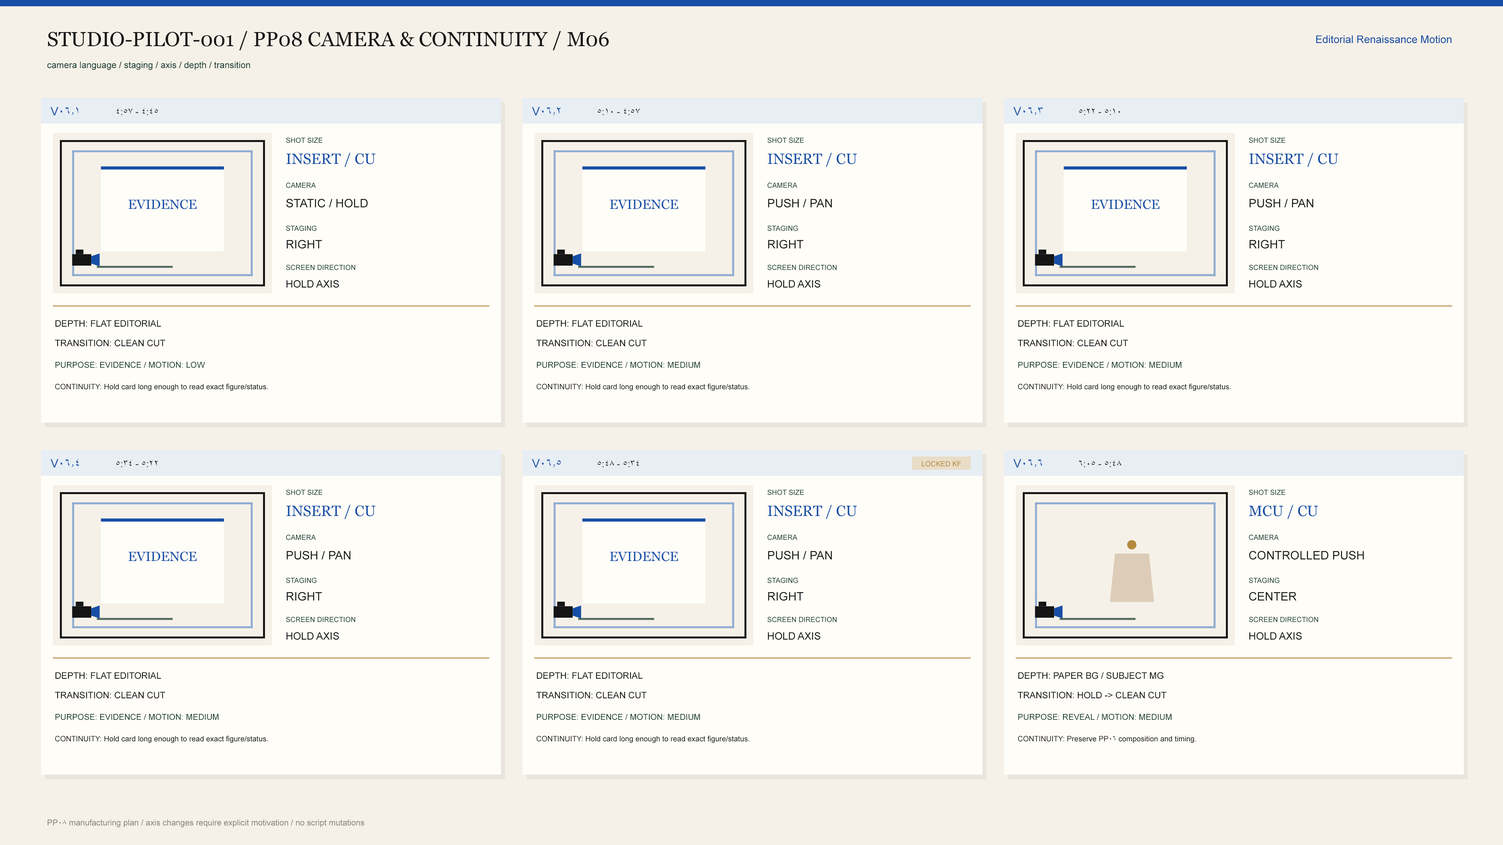
<style>
.page{position:relative;width:1503px;height:845px;background:#fffdf8}
.page>*{position:absolute;margin:0}
.t1{font:20.3px "Georgia";color:#151515}
.t2{font:10.6px "ArialMT";color:#174fa6}
.t3{font:9px "ArialMT";color:#173c32}
.t4{font:11.7px "ArialMT";color:#174fa6}
.t5{font:9.4px "ArialMT";color:#151515}
.t6{font:7px "ArialMT";color:#173c32}
.t7{font:14.9px "Georgia";color:#174fa6}
.t8{font:13.3px "Georgia";color:#174fa6}
.t9{font:11.7px "ArialMT";color:#151515}
.t10{font:10.2px "ArialMT";color:#151515}
.t11{font:9px "ArialMT";color:#151515}
.t12{font:8.2px "ArialMT";color:#173c32}
.t13{font:7.4px "ArialMT";color:#151515}
.t14{font:7px "ArialMT";color:#b58a3e}
.t15{font:21.5px "ArialMT";color:#b58a3e}
.t16{font:8.2px "ArialMT";color:#817f7a}
</style>
<div class="page">
<p class="t1" style="left:48px;top:31px;width:561px;height:19px">STUDIO-PILOT-001 / PP08 CAMERA &amp; CONTINUITY / M06</p>
<p class="t2" style="left:1316px;top:35px;width:135px;height:8px">Editorial Renaissance Motion</p>
<p class="t3" style="left:47px;top:61px;width:203px;height:9px">camera language / staging / axis / depth / transition</p>
<p class="t4" style="left:50px;top:107px;width:28px;height:8px">V06.1</p>
<p class="t5" style="left:117px;top:108px;width:41px;height:7px">4:45 - 4:57</p>
<p class="t4" style="left:532px;top:107px;width:28px;height:8px">V06.2</p>
<p class="t5" style="left:598px;top:108px;width:41px;height:7px">4:57 - 5:10</p>
<p class="t4" style="left:1013px;top:107px;width:29px;height:8px">V06.3</p>
<p class="t5" style="left:1079px;top:108px;width:41px;height:7px">5:10 - 5:22</p>
<p class="t6" style="left:286px;top:137px;width:36px;height:6px">SHOT SIZE</p>
<p class="t6" style="left:767px;top:137px;width:37px;height:6px">SHOT SIZE</p>
<p class="t6" style="left:1249px;top:137px;width:36px;height:6px">SHOT SIZE</p>
<p class="t7" style="left:286px;top:153px;width:90px;height:14px">INSERT / CU</p>
<p class="t7" style="left:767px;top:153px;width:90px;height:14px">INSERT / CU</p>
<p class="t7" style="left:1249px;top:153px;width:89px;height:14px">INSERT / CU</p>
<p class="t6" style="left:286px;top:182px;width:30px;height:6px">CAMERA</p>
<p class="t6" style="left:767px;top:182px;width:30px;height:6px">CAMERA</p>
<p class="t6" style="left:1249px;top:182px;width:29px;height:6px">CAMERA</p>
<p class="t8" style="left:128px;top:200px;width:69px;height:9px">EVIDENCE</p>
<p class="t9" style="left:286px;top:199px;width:82px;height:9px">STATIC / HOLD</p>
<p class="t8" style="left:610px;top:200px;width:68px;height:9px">EVIDENCE</p>
<p class="t9" style="left:768px;top:199px;width:64px;height:9px">PUSH / PAN</p>
<p class="t8" style="left:1091px;top:200px;width:68px;height:9px">EVIDENCE</p>
<p class="t9" style="left:1249px;top:199px;width:64px;height:9px">PUSH / PAN</p>
<p class="t6" style="left:286px;top:225px;width:31px;height:6px">STAGING</p>
<p class="t6" style="left:767px;top:225px;width:31px;height:6px">STAGING</p>
<p class="t6" style="left:1249px;top:225px;width:30px;height:6px">STAGING</p>
<p class="t9" style="left:286px;top:240px;width:36px;height:9px">RIGHT</p>
<p class="t9" style="left:768px;top:240px;width:35px;height:9px">RIGHT</p>
<p class="t9" style="left:1249px;top:240px;width:36px;height:9px">RIGHT</p>
<p class="t6" style="left:286px;top:265px;width:69px;height:5px">SCREEN DIRECTION</p>
<p class="t6" style="left:767px;top:265px;width:70px;height:5px">SCREEN DIRECTION</p>
<p class="t6" style="left:1249px;top:265px;width:69px;height:5px">SCREEN DIRECTION</p>
<p class="t10" style="left:286px;top:280px;width:53px;height:8px">HOLD AXIS</p>
<p class="t10" style="left:768px;top:280px;width:52px;height:8px">HOLD AXIS</p>
<p class="t10" style="left:1249px;top:280px;width:52px;height:8px">HOLD AXIS</p>
<p class="t11" style="left:55px;top:320px;width:106px;height:7px">DEPTH: FLAT EDITORIAL</p>
<p class="t11" style="left:536px;top:320px;width:107px;height:7px">DEPTH: FLAT EDITORIAL</p>
<p class="t11" style="left:1018px;top:320px;width:106px;height:7px">DEPTH: FLAT EDITORIAL</p>
<p class="t11" style="left:55px;top:340px;width:110px;height:7px">TRANSITION: CLEAN CUT</p>
<p class="t11" style="left:536px;top:340px;width:110px;height:7px">TRANSITION: CLEAN CUT</p>
<p class="t11" style="left:1017px;top:340px;width:111px;height:7px">TRANSITION: CLEAN CUT</p>
<p class="t12" style="left:55px;top:362px;width:150px;height:6px">PURPOSE: EVIDENCE / MOTION: LOW</p>
<p class="t12" style="left:536px;top:362px;width:164px;height:6px">PURPOSE: EVIDENCE / MOTION: MEDIUM</p>
<p class="t12" style="left:1018px;top:362px;width:163px;height:6px">PURPOSE: EVIDENCE / MOTION: MEDIUM</p>
<p class="t13" style="left:55px;top:384px;width:213px;height:7px">CONTINUITY: Hold card long enough to read exact figure/status.</p>
<p class="t13" style="left:536px;top:384px;width:213px;height:7px">CONTINUITY: Hold card long enough to read exact figure/status.</p>
<p class="t13" style="left:1018px;top:384px;width:213px;height:7px">CONTINUITY: Hold card long enough to read exact figure/status.</p>
<p class="t4" style="left:50px;top:459px;width:29px;height:9px">V06.4</p>
<p class="t5" style="left:116px;top:460px;width:42px;height:7px">5:22 - 5:34</p>
<p class="t4" style="left:532px;top:459px;width:29px;height:9px">V06.5</p>
<p class="t5" style="left:598px;top:460px;width:41px;height:7px">5:34 - 5:48</p>
<p class="t14" style="left:922px;top:461px;width:39px;height:6px">LOCKED KF</p>
<p class="t4" style="left:1013px;top:459px;width:29px;height:9px">V06.6</p>
<p class="t5" style="left:1079px;top:460px;width:42px;height:7px">5:48 - 6:05</p>
<p class="t6" style="left:286px;top:490px;width:36px;height:5px">SHOT SIZE</p>
<p class="t6" style="left:767px;top:490px;width:37px;height:5px">SHOT SIZE</p>
<p class="t6" style="left:1249px;top:490px;width:36px;height:5px">SHOT SIZE</p>
<p class="t7" style="left:286px;top:505px;width:90px;height:14px">INSERT / CU</p>
<p class="t7" style="left:767px;top:505px;width:90px;height:14px">INSERT / CU</p>
<p class="t7" style="left:1249px;top:505px;width:69px;height:14px">MCU / CU</p>
<p class="t6" style="left:286px;top:535px;width:30px;height:5px">CAMERA</p>
<p class="t6" style="left:767px;top:535px;width:30px;height:5px">CAMERA</p>
<p class="t15" style="left:1127px;top:540px;width:9px;height:10px">●</p>
<p class="t6" style="left:1249px;top:535px;width:29px;height:5px">CAMERA</p>
<p class="t8" style="left:128px;top:552px;width:69px;height:10px">EVIDENCE</p>
<p class="t9" style="left:286px;top:551px;width:65px;height:9px">PUSH / PAN</p>
<p class="t8" style="left:610px;top:552px;width:68px;height:10px">EVIDENCE</p>
<p class="t9" style="left:768px;top:551px;width:64px;height:9px">PUSH / PAN</p>
<p class="t9" style="left:1249px;top:551px;width:115px;height:9px">CONTROLLED PUSH</p>
<p class="t6" style="left:286px;top:578px;width:31px;height:5px">STAGING</p>
<p class="t6" style="left:767px;top:578px;width:31px;height:5px">STAGING</p>
<p class="t6" style="left:1249px;top:578px;width:30px;height:5px">STAGING</p>
<p class="t9" style="left:286px;top:592px;width:36px;height:9px">RIGHT</p>
<p class="t9" style="left:768px;top:592px;width:35px;height:9px">RIGHT</p>
<p class="t9" style="left:1249px;top:592px;width:47px;height:9px">CENTER</p>
<p class="t6" style="left:286px;top:617px;width:69px;height:6px">SCREEN DIRECTION</p>
<p class="t6" style="left:767px;top:617px;width:70px;height:6px">SCREEN DIRECTION</p>
<p class="t6" style="left:1249px;top:617px;width:69px;height:6px">SCREEN DIRECTION</p>
<p class="t10" style="left:286px;top:632px;width:53px;height:8px">HOLD AXIS</p>
<p class="t10" style="left:768px;top:632px;width:52px;height:8px">HOLD AXIS</p>
<p class="t10" style="left:1249px;top:632px;width:52px;height:8px">HOLD AXIS</p>
<p class="t11" style="left:55px;top:672px;width:106px;height:7px">DEPTH: FLAT EDITORIAL</p>
<p class="t11" style="left:536px;top:672px;width:107px;height:7px">DEPTH: FLAT EDITORIAL</p>
<p class="t11" style="left:1018px;top:672px;width:145px;height:7px">DEPTH: PAPER BG / SUBJECT MG</p>
<p class="t11" style="left:55px;top:692px;width:110px;height:7px">TRANSITION: CLEAN CUT</p>
<p class="t11" style="left:536px;top:692px;width:110px;height:7px">TRANSITION: CLEAN CUT</p>
<p class="t11" style="left:1017px;top:692px;width:149px;height:7px">TRANSITION: HOLD -&gt; CLEAN CUT</p>
<p class="t12" style="left:55px;top:714px;width:164px;height:6px">PURPOSE: EVIDENCE / MOTION: MEDIUM</p>
<p class="t12" style="left:536px;top:714px;width:164px;height:6px">PURPOSE: EVIDENCE / MOTION: MEDIUM</p>
<p class="t12" style="left:1018px;top:714px;width:153px;height:6px">PURPOSE: REVEAL / MOTION: MEDIUM</p>
<p class="t13" style="left:55px;top:736px;width:213px;height:7px">CONTINUITY: Hold card long enough to read exact figure/status.</p>
<p class="t13" style="left:536px;top:736px;width:213px;height:7px">CONTINUITY: Hold card long enough to read exact figure/status.</p>
<p class="t13" style="left:1018px;top:736px;width:178px;height:7px">CONTINUITY: Preserve PP06 composition and timing.</p>
<p class="t16" style="left:47px;top:819px;width:317px;height:9px">PP08 manufacturing plan / axis changes require explicit motivation / no script mutations</p>
</div>
